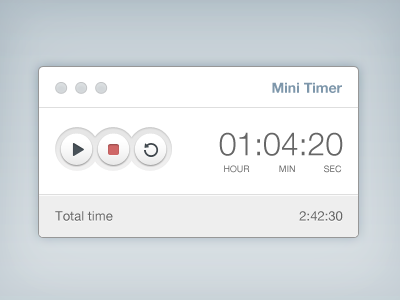
<style>
.page{position:relative;width:400px;height:300px;background:#ffffff}
.page>*{position:absolute;margin:0}
.t1{font:14px "HelveticaNeue-Bold";color:#7e97ab}
.t2{font:32px "HelveticaNeue-Light";color:#666666}
.t3{font:9px "HelveticaNeue"}
.t4{font:9px "HelveticaNeue";color:#666666}
.t5{font:13px "HelveticaNeue";color:#666666}
</style>
<div class="page">
<p class="t1" style="left:272px;top:82px;width:70px;height:11px">Mini Timer</p>
<p class="t2" style="left:219px;top:132px;width:124px;height:24px">01:04:20</p>
<p class="t3" style="left:224px;top:165px;width:26px;height:8px">HOUR</p>
<p class="t4" style="left:279px;top:165px;width:16px;height:7px">MIN</p>
<p class="t3" style="left:324px;top:165px;width:18px;height:8px">SEC</p>
<p class="t5" style="left:55px;top:211px;width:58px;height:10px">Total time</p>
<p class="t5" style="left:299px;top:211px;width:44px;height:10px">2:42:30</p>
</div>
